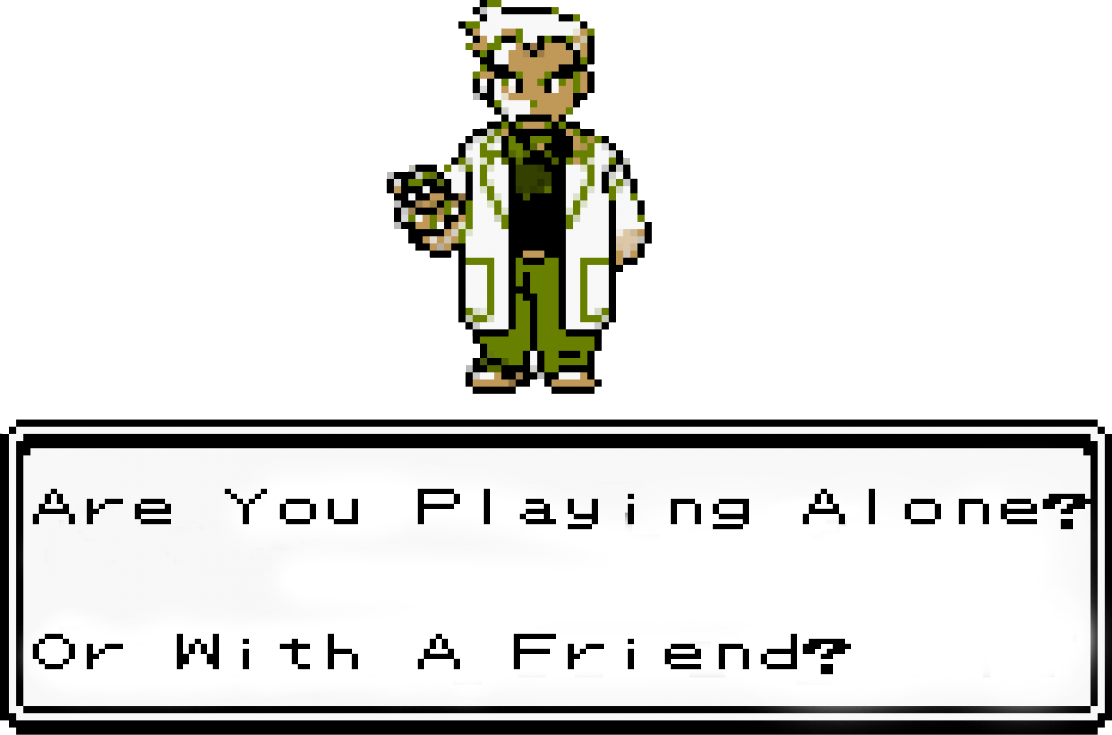
<style>
.page{position:relative;width:1112px;height:735px;background:#ffffff}
.page>*{position:absolute;margin:0}
.t1{font:40.3px "PokemonGB";color:#000000;scale:1.19 1}
</style>
<div class="page">
<p class="t1" style="left:32px;top:488px;width:1059px;height:187px">Are You Playing Alone? <br><br><br>Or With A Friend?</p>
</div>
